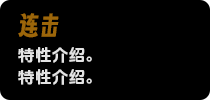
<style>
.page{position:relative;width:210px;height:100px;background:#000000}
.page>*{position:absolute;margin:0}
.t1{font:26.1px "zihunbiantaoti";letter-spacing:0.01em;color:#9c660a;text-transform:uppercase}
.t2{font:16.7px/21.7px "DOUYINSANSBOLD-GB";letter-spacing:0.01em;color:#e3e3e3;text-transform:uppercase}
</style>
<div class="page">
<p class="t1" style="left:18px;top:13px;width:41px;height:25px">连击</p>
<p class="t2" style="left:18px;top:47px;width:74px;height:38px">特性介绍。<br>特性介绍。</p>
</div>
